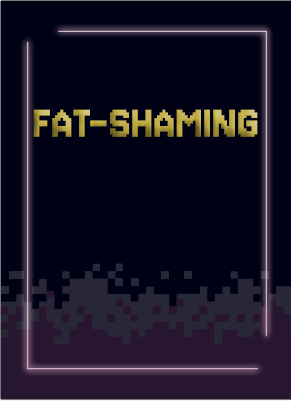
<style>
.page{position:relative;width:291px;height:401px;background:#000115}
.page>*{position:absolute;margin:0}
.t1{font:50px "Jersey10-Regular";letter-spacing:0.025em}
</style>
<div class="page">
<p class="t1" style="left:33px;top:109px;width:225px;height:28px">FAT-SHAMING</p>
</div>
